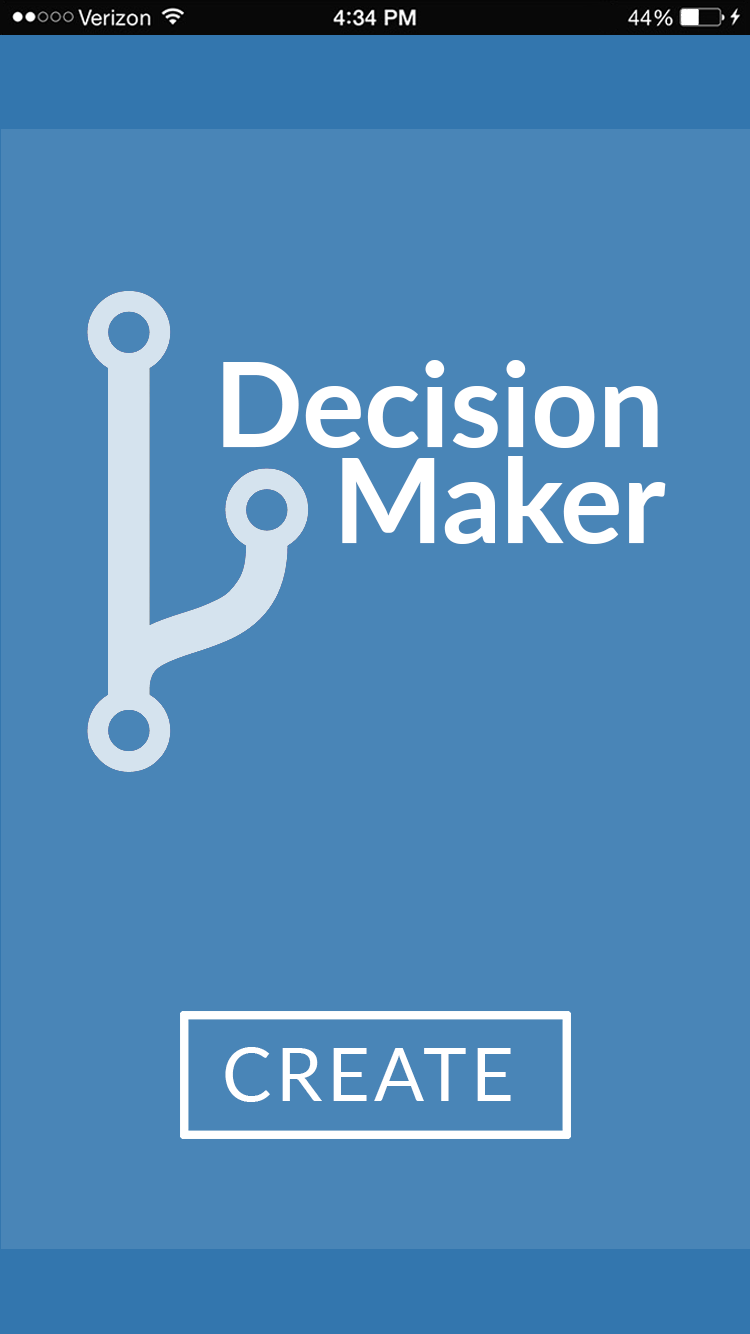
<style>
.page{position:relative;width:750px;height:1334px;background:#4985b7}
.page>*{position:absolute;margin:0}
.t1{font:116.7px "Lato-Bold";color:#ffffff}
.t2{font:73.7px "Lato-Regular";letter-spacing:0.06em;color:#ffffff}
</style>
<div class="page">
<p class="t1" style="left:223px;top:360px;width:443px;height:184px">Decision Maker</p>
<p class="t2" style="left:225px;top:1047px;width:286px;height:55px">CREATE</p>
</div>
